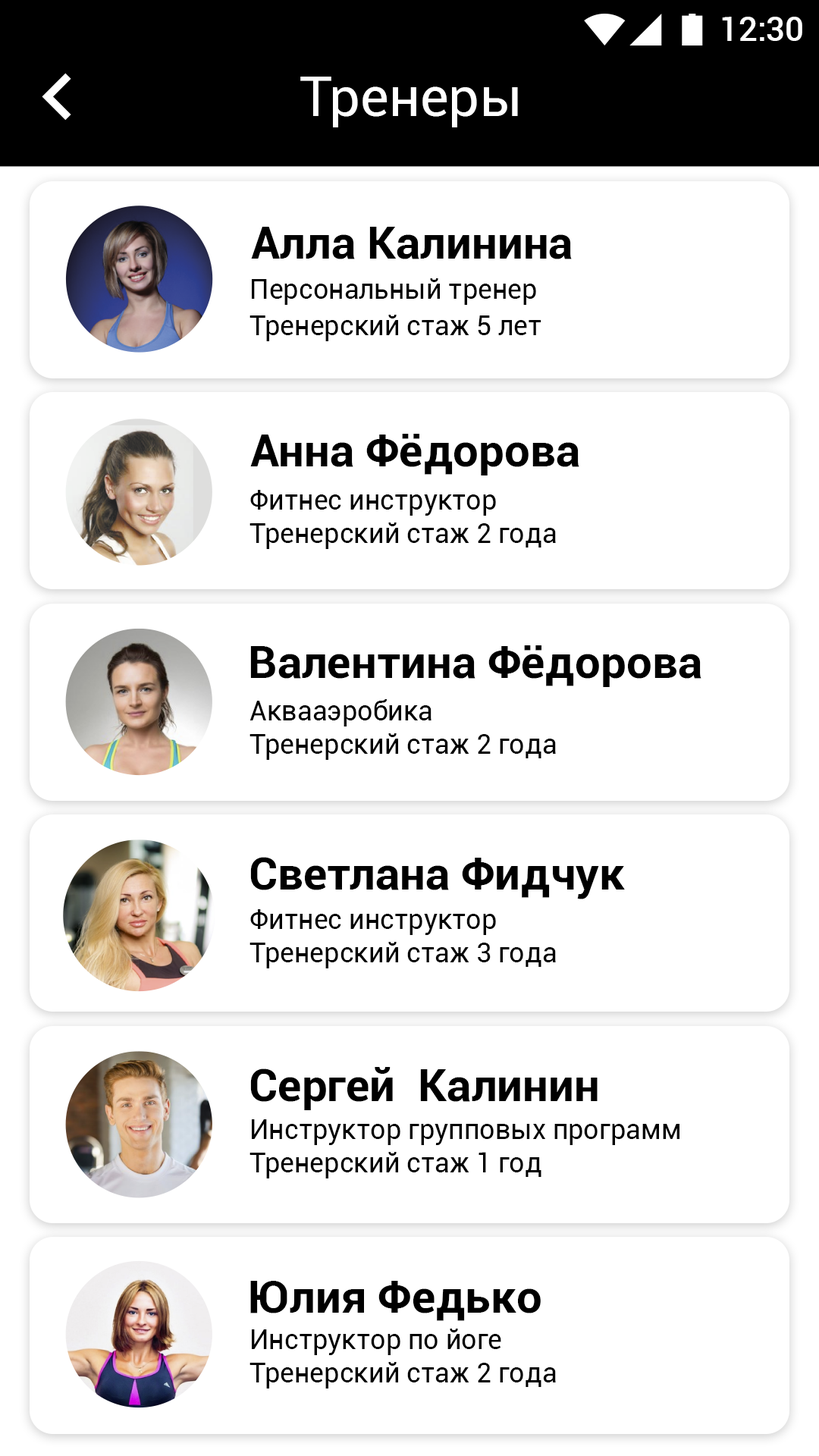
<style>
.page{position:relative;width:819px;height:1456px;background:#ffffff}
.page>*{position:absolute;margin:0}
.t1{font:33.4px "Roboto-Medium";color:#ffffff}
.t2{font:54.6px "Roboto-Regular";color:#ffffff}
.t3{font:45.5px "Roboto-Bold";color:#000000}
.t4{font:27.3px/36.4px "Roboto-Regular";color:#000000}
.t5{font:27.3px "Roboto-Regular";color:#000000}
</style>
<div class="page">
<p class="t1" style="left:722px;top:17px;width:80px;height:24px">12:30</p>
<p class="t2" style="left:300px;top:77px;width:218px;height:50px">Тренеры</p>
<p class="t3" style="left:251px;top:227px;width:321px;height:32px">Алла Калинина</p>
<p class="t4" style="left:249px;top:278px;width:292px;height:63px">Персональный тренер<br>Тренерский стаж 5 лет</p>
<p class="t3" style="left:250px;top:434px;width:329px;height:41px">Анна Фёдорова</p>
<p class="t5" style="left:249px;top:490px;width:307px;height:59px">Фитнес инструктор<br>Тренерский стаж 2 года</p>
<p class="t3" style="left:250px;top:645px;width:451px;height:42px">Валентина Фёдорова</p>
<p class="t5" style="left:249px;top:699px;width:307px;height:61px">Аквааэробика<br>Тренерский стаж 2 года</p>
<p class="t3" style="left:250px;top:857px;width:375px;height:42px">Светлана Фидчук</p>
<p class="t5" style="left:249px;top:909px;width:307px;height:59px">Фитнес инструктор<br>Тренерский стаж 3 года</p>
<p class="t3" style="left:250px;top:1067px;width:348px;height:43px">Сергей  Калинин</p>
<p class="t5" style="left:249px;top:1119px;width:430px;height:59px">Инструктор групповых программ<br>Тренерский стаж 1 год</p>
<p class="t3" style="left:250px;top:1281px;width:291px;height:40px">Юлия Федько</p>
<p class="t5" style="left:249px;top:1329px;width:307px;height:59px">Инструктор по йоге<br>Тренерский стаж 2 года</p>
</div>
